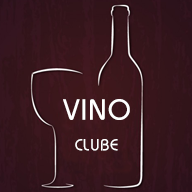
<style>
.page{position:relative;width:192px;height:192px}
.page>*{position:absolute;margin:0}
.t1{font:36px "NPITala";letter-spacing:0.04em;color:#ffffff}
.t2{font:20px "NPITala";letter-spacing:0.04em;color:#ffffff}
</style>
<div class="page">
<p class="t1" style="left:63px;top:99px;width:67px;height:21px">VINO</p>
<p class="t2" style="left:75px;top:139px;width:43px;height:12px">CLUBE</p>
</div>
